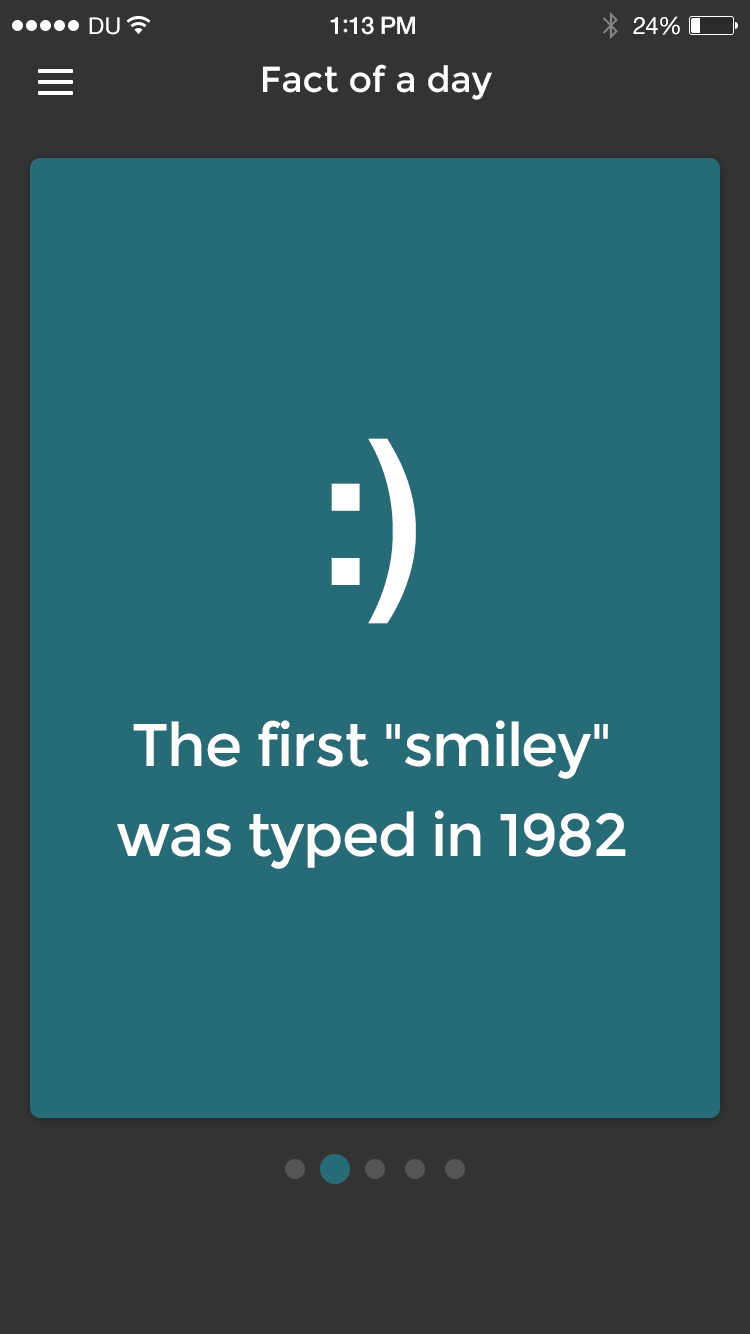
<style>
.page{position:relative;width:750px;height:1334px;background:#276b76}
.page>*{position:absolute;margin:0}
.t1{font:23px "HelveticaNeue";letter-spacing:0.02em;color:#ffffff}
.t2{font:24px "HelveticaNeue-Medium";letter-spacing:-0.02em;color:#ffffff}
.t3{font:26px "Avenir-Medium";letter-spacing:-0.02em;color:#ffffff}
.t4{font:24px "HelveticaNeue";letter-spacing:-0.02em;color:#ffffff}
.t5{font:36px "Montserrat-Regular";color:#ffffff}
.t6{font:200px "HelveticaNeue-Medium";letter-spacing:-0.02em;color:#ffffff}
.t7{font:60px/90px "Montserrat-Regular";letter-spacing:-0.02em;color:#ffffff}
</style>
<div class="page">
<p class="t1" style="left:89px;top:17px;width:31px;height:18px">DU</p>
<p class="t2" style="left:330px;top:16px;width:85px;height:19px">1<span class="t3">:</span>13 PM</p>
<p class="t4" style="left:633px;top:16px;width:47px;height:19px">24%</p>
<p class="t5" style="left:263px;top:64px;width:229px;height:36px">Fact of a day</p>
<p class="t6" style="left:331px;top:438px;width:85px;height:186px">:)</p>
<p class="t7" style="left:117px;top:720px;width:509px;height:149px;text-align:center">The first "smiley"<br>was typed in 1982</p>
</div>
